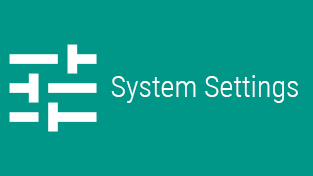
<style>
.page{position:relative;width:313px;height:176px;background:#009688}
.page>*{position:absolute;margin:0}
.t1{font:30px "RobotoCondensed-Light";color:#ffffff}
</style>
<div class="page">
<p class="t1" style="left:111px;top:75px;width:187px;height:28px">System Settings</p>
</div>
